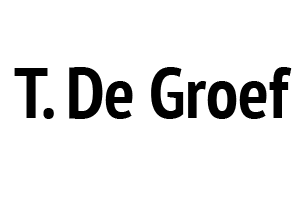
<style>
.page{position:relative;width:300px;height:200px;background:#ffffff}
.page>*{position:absolute;margin:0}
.t1{font:72px "PTSans-NarrowBold";color:#000000}
</style>
<div class="page">
<p class="t1" style="left:14px;top:67px;width:278px;height:52px">T. De Groef</p>
</div>
